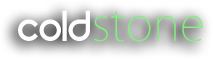
<style>
.page{position:relative;width:213px;height:60px}
.page>*{position:absolute;margin:0}
.t1{font:46px "KozGoPro-ExtraLight";color:#80f07e}
.t2{font:48px "REZ";color:#ffffff}
</style>
<div class="page">
<p class="t1" style="left:18px;top:10px;width:185px;height:32px"><span class="t2">cold</span>stone</p>
</div>
